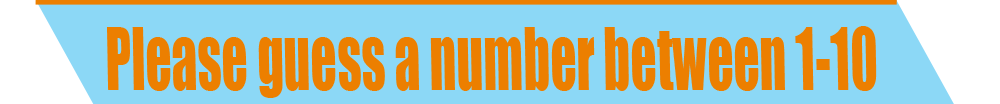
<style>
.page{position:relative;width:1000px;height:104px;background:#8cd8f6}
.page>*{position:absolute;margin:0}
.t1{font:80.2px "Impact";color:#ec7f00;scale:0.64 1}
</style>
<div class="page">
<p class="t1" style="left:107px;top:26px;width:770px;height:72px">Please guess a number between 1-10</p>
</div>
